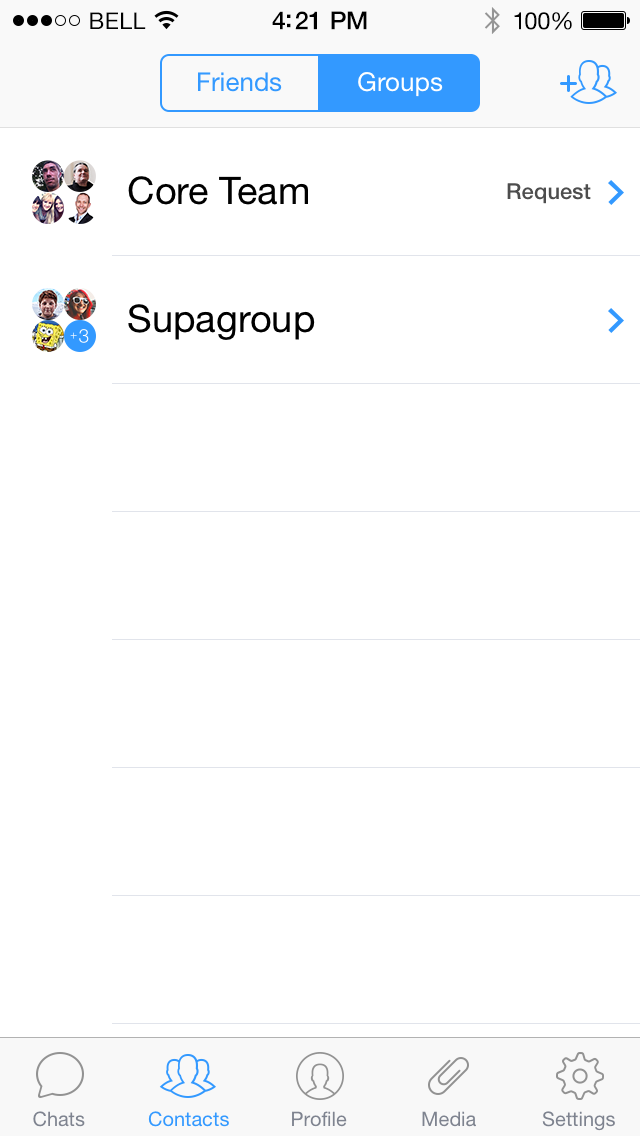
<style>
.page{position:relative;width:640px;height:1136px;background:#ffffff}
.page>*{position:absolute;margin:0}
.t1{font:23px "HelveticaNeue";letter-spacing:0.02em;color:#000000}
.t2{font:25px "HelveticaNeue-Medium";letter-spacing:-0.02em;color:#000000}
.t3{font:24px "HelveticaNeue";letter-spacing:-0.02em;color:#000000}
.t4{font:26px "HelveticaNeue";color:#3399ff}
.t5{font:26px "HelveticaNeue";color:#ffffff}
.t6{font:38px "HelveticaNeue";color:#000000}
.t7{font:22px "HelveticaNeue-Medium";color:#4d4d4d}
.t8{font:20px "HelveticaNeue";color:#7e838f}
.t9{font:20px "HelveticaNeue";color:#3399ff}
</style>
<div class="page">
<p class="t1" style="left:90px;top:12px;width:56px;height:17px">BELL</p>
<p class="t2" style="left:272px;top:11px;width:95px;height:19px">4:21 PM</p>
<p class="t3" style="left:514px;top:12px;width:58px;height:18px">100%</p>
<p class="t4" style="left:198px;top:72px;width:84px;height:20px">Friends</p>
<p class="t5" style="left:358px;top:72px;width:85px;height:25px">Groups</p>
<p class="t6" style="left:128px;top:176px;width:180px;height:29px">Core Team</p>
<p class="t7" style="left:507px;top:183px;width:84px;height:21px">Request</p>
<p class="t6" style="left:128px;top:304px;width:187px;height:36px">Supagroup</p>
<p class="t8" style="left:33px;top:1111px;width:52px;height:16px">Chats</p>
<p class="t9" style="left:148px;top:1111px;width:81px;height:16px">Contacts</p>
<p class="t8" style="left:292px;top:1111px;width:55px;height:16px">Profile</p>
<p class="t8" style="left:422px;top:1111px;width:54px;height:16px">Media</p>
<p class="t8" style="left:542px;top:1111px;width:73px;height:20px">Settings</p>
</div>
